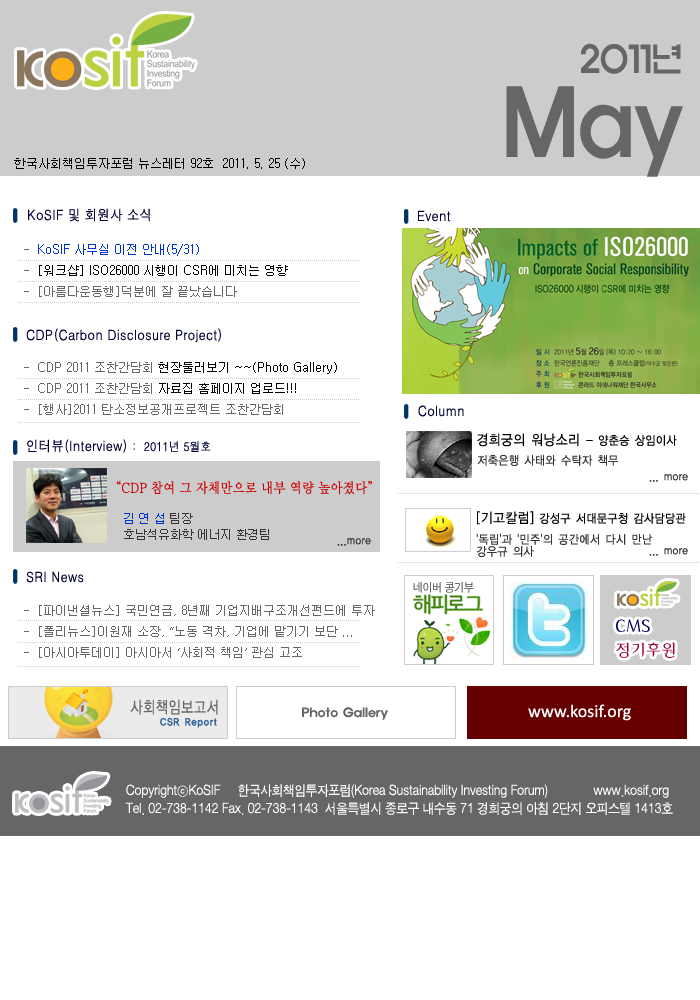
<style>
.page{position:relative;width:700px;height:1000px;background:#ffffff}
.page>*{position:absolute;margin:0}
.t1{font:36.1px/41.9px "ExpoM-HM";color:#666666;scale:0.89 1}
.t2{font:90.2px/41.9px "ExpoM-HM";color:#666666;scale:0.89 1}
.t3{font:12px "Gulim";color:#000000}
.t4{font:14px "H2gtrM";color:#000033;scale:0.9 1}
.t5{font:12px "Gulim";color:#666666}
.t6{font:12px "Gulim";color:#0033cc}
.t7{font:12px "YDIYGO120-KSCpc-EUC-H";letter-spacing:-0.025em;color:#000000;scale:0.9 1}
.t8{font:14px "YDIYGO120-KSCpc-EUC-H";letter-spacing:-0.025em;color:#000000;scale:0.9 1}
.t9{font:12px "H2gtrM";color:#000033;scale:0.9 1}
.t10{font:12px "YDIYGO120-KSCpc-EUC-H";letter-spacing:-0.025em;color:#333333;scale:0.9 1}
.t11{font:14px "Ymjo420";letter-spacing:-0.025em;color:#cc0000;scale:0.9 1}
.t12{font:12px/16px "Gulim";letter-spacing:-0.025em;color:#333333}
.t13{font:12px/16px "Gulim";letter-spacing:-0.025em;color:#0033cc}
.t14{font:12px/12px "YDIYGO120-KSCpc-EUC-H";letter-spacing:-0.025em;color:#333333;scale:0.9 1}
.t15{font:17.1px/24px "Gaeul";color:#990033}
.t16{font:17.1px/24px "Gaeul";color:#000066}
.t17{font:12px "ExpoM-HM";color:#666666}
.t18{font:18px "Calibri";color:#ffffff}
.t19{font:14px/18px "SandJg";color:#ffffff;scale:0.9 1}
</style>
<div class="page">
<p class="t1" style="left:506px;top:43px;width:177px;height:134px;text-align:right">2011년<br><span class="t2">May</span></p>
<p class="t3" style="left:14px;top:158px;width:291px;height:11px">한국사회책임투자포럼 뉴스레터 92호  2011. 5. 25 (수)</p>
<p class="t4" style="left:28px;top:208px;width:122px;height:14px">KoSIF 및 회원사 소식</p>
<p class="t4" style="left:418px;top:210px;width:33px;height:12px">Event</p>
<p class="t3" style="left:24px;top:244px;width:264px;height:53px"><span class="t5">-  </span><span class="t6">KoSIF 사무실 이전 안내(5/31)  <br></span><span class="t5">-  </span>[워크샵] ISO26000 시행이 CSR에 미치는 영향 <br><span class="t5">-  [아름다운동행]덕분에 잘 끝났습니다</span></p>
<p class="t4" style="left:26px;top:328px;width:195px;height:14px">CDP(Carbon Disclosure Project)</p>
<p class="t5" style="left:24px;top:362px;width:313px;height:53px">-  CDP 2011 조찬간담회 <span class="t3">현장둘러보기 ~~(Photo Gallery)<br></span>-  CDP 2011 조찬간담회 <span class="t3">자료집 홈페이지 업로드!!!<br></span>-  [행사]2011 탄소정보공개프로젝트 조찬간담회</p>
<p class="t4" style="left:418px;top:405px;width:46px;height:12px">Column</p>
<p class="t7" style="left:477px;top:433px;width:200px;height:14px"><span class="t8">경희궁의 워낭소리 </span>- 양춘승 상임이사</p>
<p class="t4" style="left:27px;top:439px;width:184px;height:14px">인터뷰(Interview) <span class="t9">:  2011년 5월호</span></p>
<p class="t10" style="left:477px;top:455px;width:141px;height:11px">저축은행 사태와 수탁자 책무</p>
<p class="t11" style="left:116px;top:480px;width:256px;height:15px">“CDP 참여 그 자체만으로 내부 역량 높아졌다”</p>
<p class="t10" style="left:649px;top:474px;width:39px;height:8px">... more</p>
<p class="t12" style="left:124px;top:513px;width:145px;height:27px"><span class="t13">김 연 섭</span> 팀장 <br>호남석유화학 에너지 환경팀</p>
<p class="t7" style="left:477px;top:511px;width:209px;height:14px"><span class="t8">[기고칼럼]</span> 강성구 서대문구청 감사담당관</p>
<p class="t14" style="left:476px;top:533px;width:176px;height:24px">'독립'과 '민주'의 공간에서 다시 만난 <br>강우규 의사</p>
<p class="t10" style="left:337px;top:538px;width:34px;height:8px">...more</p>
<p class="t10" style="left:649px;top:548px;width:39px;height:8px">... more</p>
<p class="t4" style="left:26px;top:571px;width:58px;height:12px">SRI News</p>
<p class="t5" style="left:24px;top:605px;width:351px;height:53px">-  [파이낸셜뉴스] 국민연금, 8년째 기업지배구조개선펀드에 투자 <br>-  [폴리뉴스]이원재 소장, “노동 격차, 기업에 맡기기 보단 ...  <br>-  [아시아투데이] 아시아서 ‘사회적 책임’ 관심 고조</p>
<p class="t15" style="left:616px;top:619px;width:59px;height:39px"><span class="t16">CMS <br></span>정기후원</p>
<p class="t17" style="left:302px;top:707px;width:86px;height:13px">Photo Gallery</p>
<p class="t18" style="left:528px;top:704px;width:103px;height:17px">www.kosif.org</p>
<p class="t19" style="left:125px;top:784px;width:548px;height:31px">CopyrightⓒKoSIF     한국사회책임투자포럼(Korea Sustainability Investing Forum)             www.kosif.org <br>Tel. 02-738-1142 Fax. 02-738-1143  서울특별시 종로구 내수동 71 경희궁의 아침 2단지 오피스텔 1413호</p>
</div>
